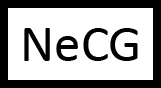
<style>
.page{position:relative;width:161px;height:88px;background:#ffffff}
.page>*{position:absolute;margin:0}
.t1{font:53px "Calibri";color:#000000}
</style>
<div class="page">
<p class="t1" style="left:24px;top:28px;width:114px;height:33px">NeCG</p>
</div>
